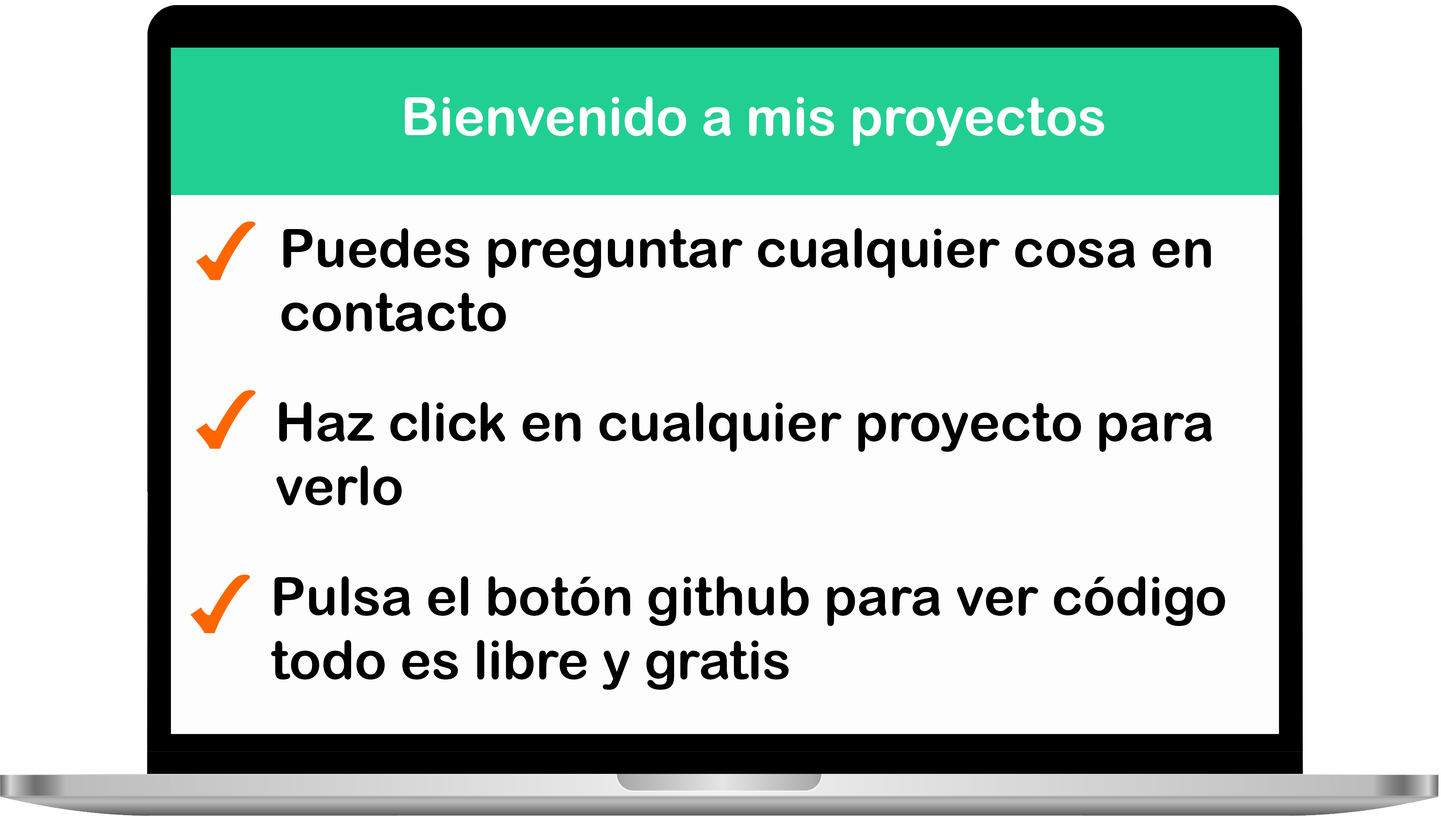
<style>
.page{position:relative;width:1441px;height:827px;background:#fdfdfd}
.page>*{position:absolute;margin:0}
.t1{font:53.1px "ArialRoundedMTBold";color:#ffffff}
.t2{font:53.1px "ArialRoundedMTBold";color:#000000}
</style>
<div class="page">
<p class="t1" style="left:405px;top:97px;width:700px;height:49px">Bienvenido a mis proyectos</p>
<p class="t2" style="left:276px;top:402px;width:936px;height:104px">Haz click en cualquier proyecto para<br>verlo</p>
<p class="t2" style="left:271px;top:577px;width:954px;height:113px">Pulsa el botón github para ver código<br>todo es libre y gratis</p>
</div>
